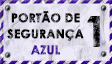
<style>
.page{position:relative;width:112px;height:64px}
.page>*{position:absolute;margin:0}
.t1{font:12px/16px "CenturyGothic-Bold";letter-spacing:0.005em;text-transform:uppercase;font-weight:bold}
.t2{font:41.3px "CenturyGothic-Bold";letter-spacing:0.005em;text-transform:uppercase;font-weight:bold}
</style>
<div class="page">
<p class="t1" style="left:7px;top:11px;width:77px;height:44px;text-align:center">PORTÃO DE<br>SEGURANÇA<br>AZUL</p>
<p class="t2" style="left:87px;top:16px;width:14px;height:31px">1</p>
</div>
